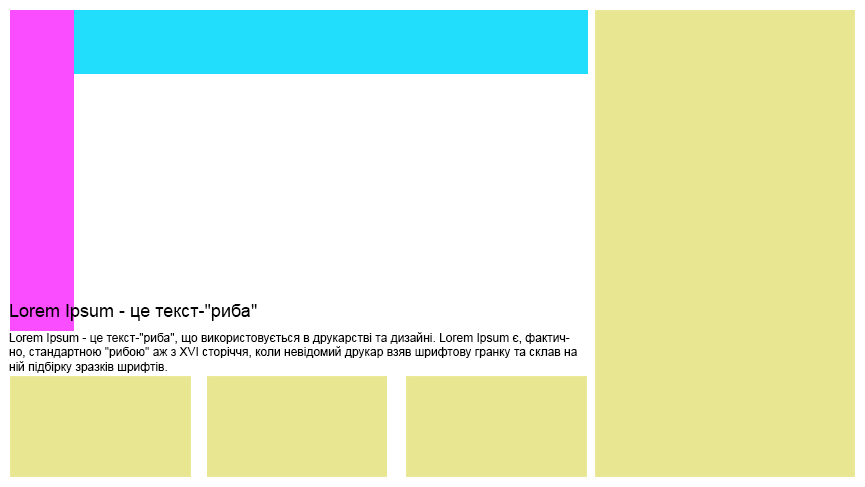
<style>
.page{position:relative;width:865px;height:487px;background:#ffffff}
.page>*{position:absolute;margin:0}
.t1{font:18px "ArialMT";color:#000000}
.t2{font:12px "ArialMT";color:#000000}
</style>
<div class="page">
<p class="t1" style="left:10px;top:304px;width:247px;height:17px">Lorem Ipsum - це текст-"риба"</p>
<p class="t2" style="left:9px;top:332px;width:568px;height:41px">Lorem Ipsum - це текст-"риба", що використовується в друкарстві та дизайні. Lorem Ipsum є, фактично, стандартною "рибою" аж з XVI сторіччя, коли невідомий друкар взяв шрифтову гранку та склав на ній підбірку зразків шрифтів.</p>
</div>
